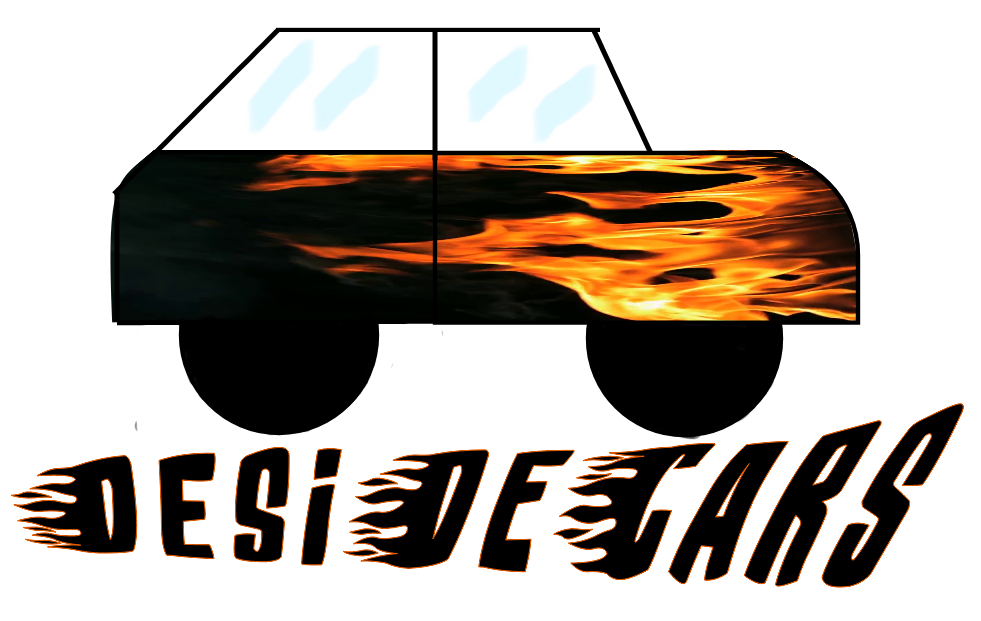
<style>
.page{position:relative;width:981px;height:621px;background:#ffffff}
.page>*{position:absolute;margin:0}
.t1{font:102px/100px "PlayWithFire";letter-spacing:0.118em;color:#000000}
</style>
<div class="page">
<p class="t1" style="left:10px;top:402px;width:955px;height:187px">DesiDeCars</p>
</div>
